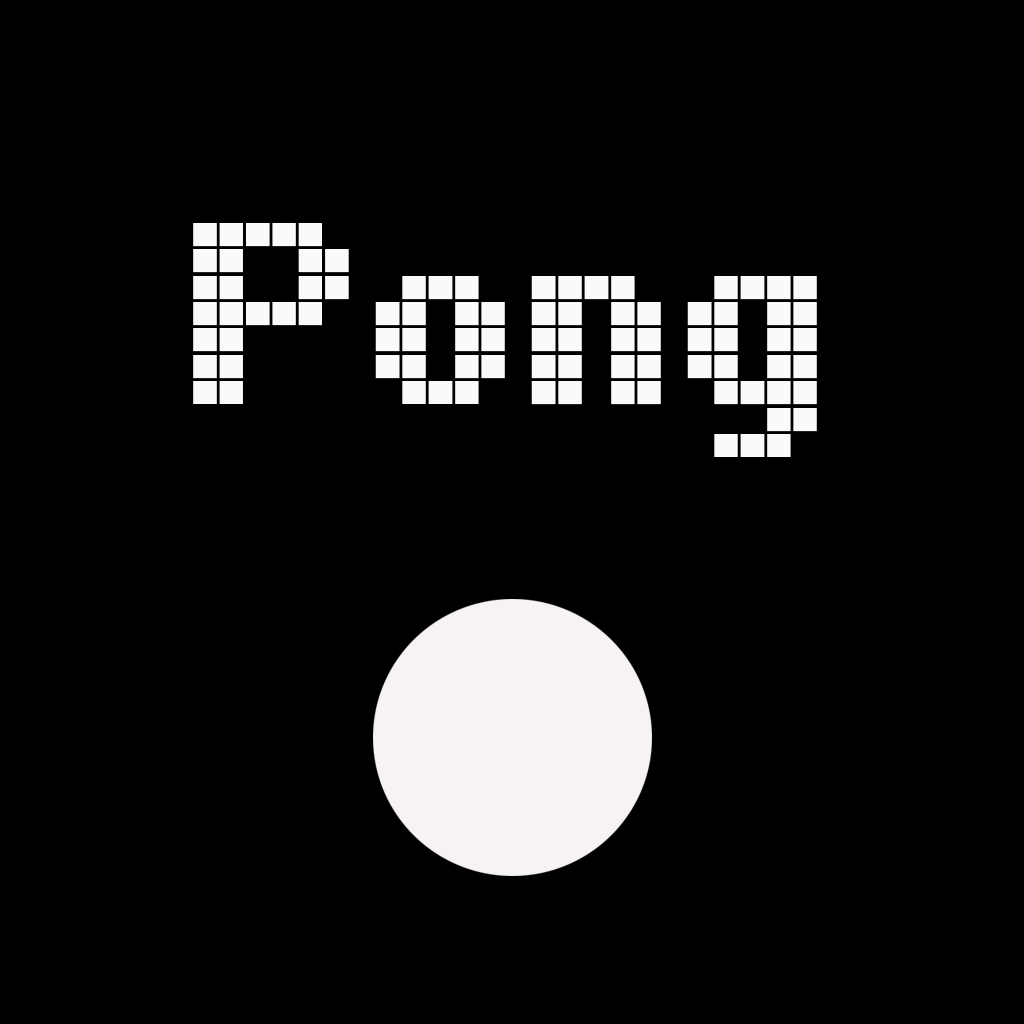
<style>
.page{position:relative;width:1024px;height:1024px;background:#000000}
.page>*{position:absolute;margin:0}
.t1{font:260px "LLPixel";color:#fbf9f9}
</style>
<div class="page">
<p class="t1" style="left:193px;top:223px;width:624px;height:234px">Pong</p>
</div>
